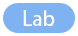
<style>
.page{position:relative;width:78px;height:36px;background:#7eb2f0}
.page>*{position:absolute;margin:0}
.t1{font:20px "AdobeHeitiStd-Regular";color:#ffffff}
</style>
<div class="page">
<p class="t1" style="left:23px;top:10px;width:32px;height:16px">Lab</p>
</div>
